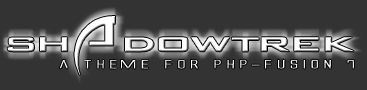
<style>
.page{position:relative;width:367px;height:90px;background:#333333}
.page>*{position:absolute;margin:0}
.t1{font:45px "Backslash";color:#ffffff}
.t2{font:75px "Backslash";color:#ffffff}
.t3{font:10.8px "AlienLeague";color:#ffffff;scale:2.62 1}
</style>
<div class="page">
<p class="t1" style="left:7px;top:16px;width:347px;height:59px">Sh<span class="t2">a</span>dowTrek</p>
<p class="t3" style="left:59px;top:60px;width:295px;height:9px">a theme for php-fusion 7</p>
</div>
